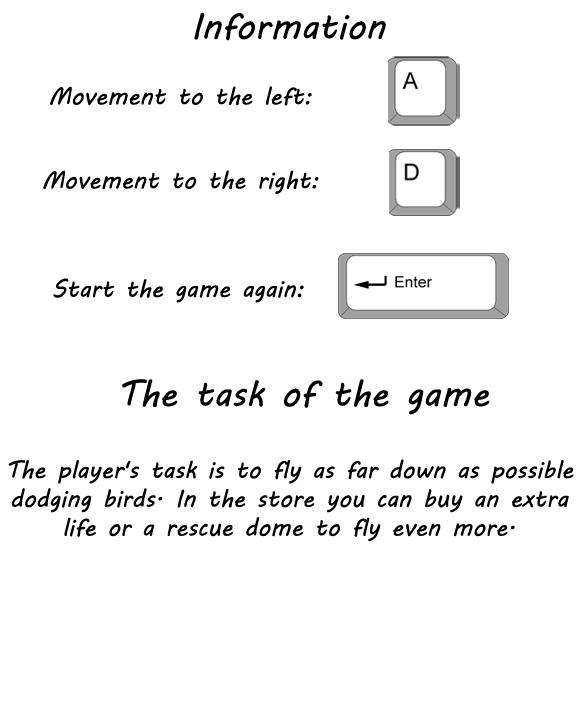
<style>
.page{position:relative;width:576px;height:720px;background:#ffffff}
.page>*{position:absolute;margin:0}
.t1{font:36px "MVBoli";color:#000000}
.t2{font:24px "MVBoli";color:#000000}
</style>
<div class="page">
<p class="t1" style="left:194px;top:12px;width:192px;height:29px">Information</p>
<p class="t2" style="left:50px;top:86px;width:262px;height:20px">Movement to the left:</p>
<p class="t2" style="left:43px;top:170px;width:276px;height:24px">Movement to the right:</p>
<p class="t2" style="left:53px;top:278px;width:251px;height:25px">Start the game again:</p>
<p class="t1" style="left:122px;top:379px;width:368px;height:36px">The task of the game</p>
<p class="t2" style="left:8px;top:459px;width:566px;height:83px;text-align:center">The player's task is to fly as far down as possible<br> dodging birds. In the store you can buy an extra <br>life or a rescue dome to fly even more.</p>
</div>
